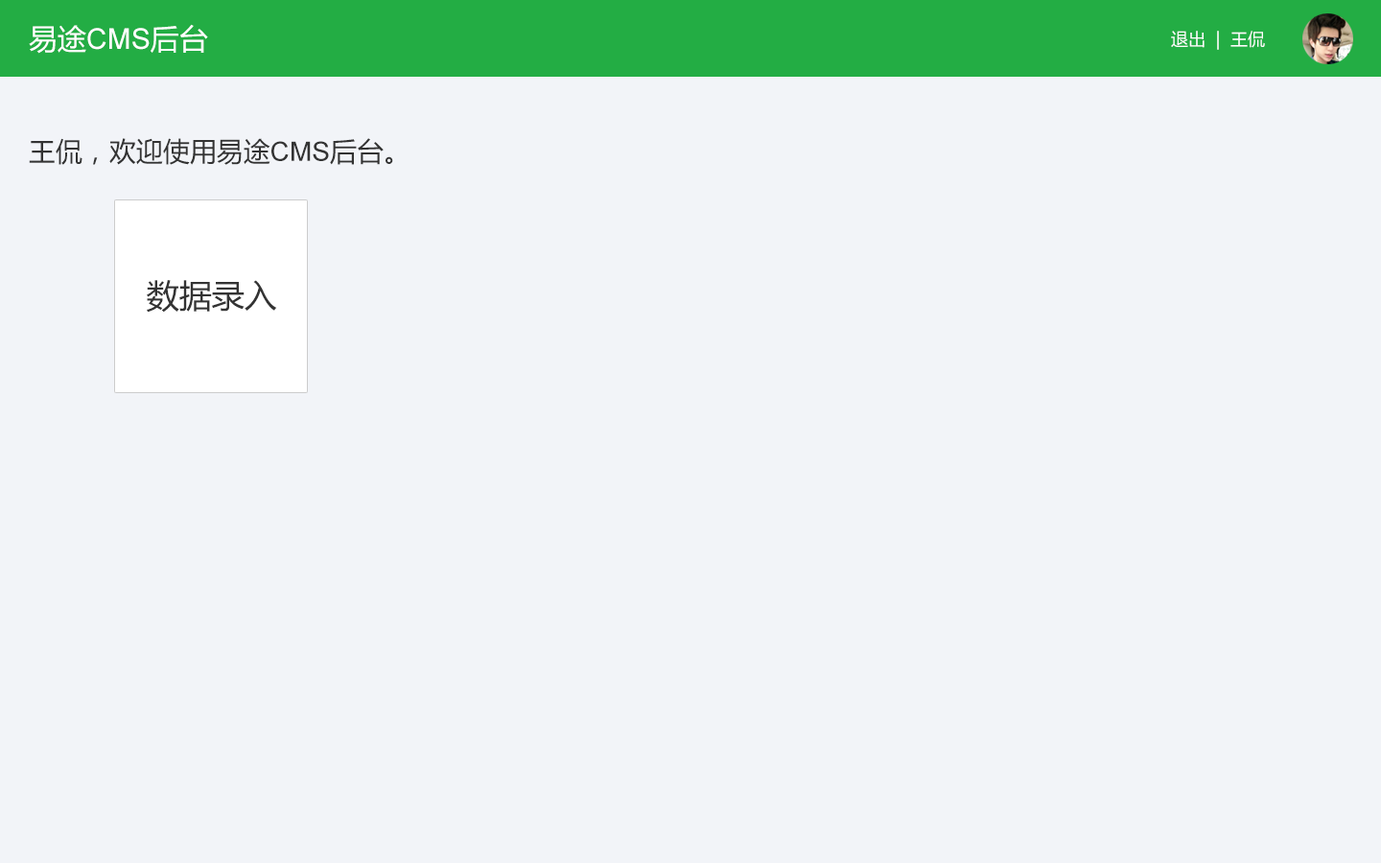
<style>
.page{position:relative;width:1381px;height:863px;background:#f2f4f8}
.page>*{position:absolute;margin:0}
.t1{font:28.8px "ArialMT";color:#ffffff}
.t2{font:28.8px "MicrosoftYaHei";color:#ffffff}
.t3{font:17.3px "MicrosoftYaHei";color:#ffffff}
.t4{font:26.9px "MicrosoftYaHei";color:#333333}
.t5{font:26.9px "ArialMT";color:#333333}
.t6{font:28.8px "MicrosoftYaHei";color:#333333}
.t7{font:32.6px "MicrosoftYaHei";color:#333333}
</style>
<div class="page">
<p class="t1" style="left:29px;top:24px;width:179px;height:30px"><span class="t2">易途</span>CMS<span class="t2">后台</span></p>
<p class="t3" style="left:1171px;top:31px;width:94px;height:19px">退出  |  王侃</p>
<p class="t4" style="left:29px;top:138px;width:364px;height:27px">王侃，欢迎使用易途<span class="t5">CMS</span>后台<span class="t6">。</span></p>
<p class="t7" style="left:147px;top:280px;width:130px;height:33px">数据录入</p>
</div>
